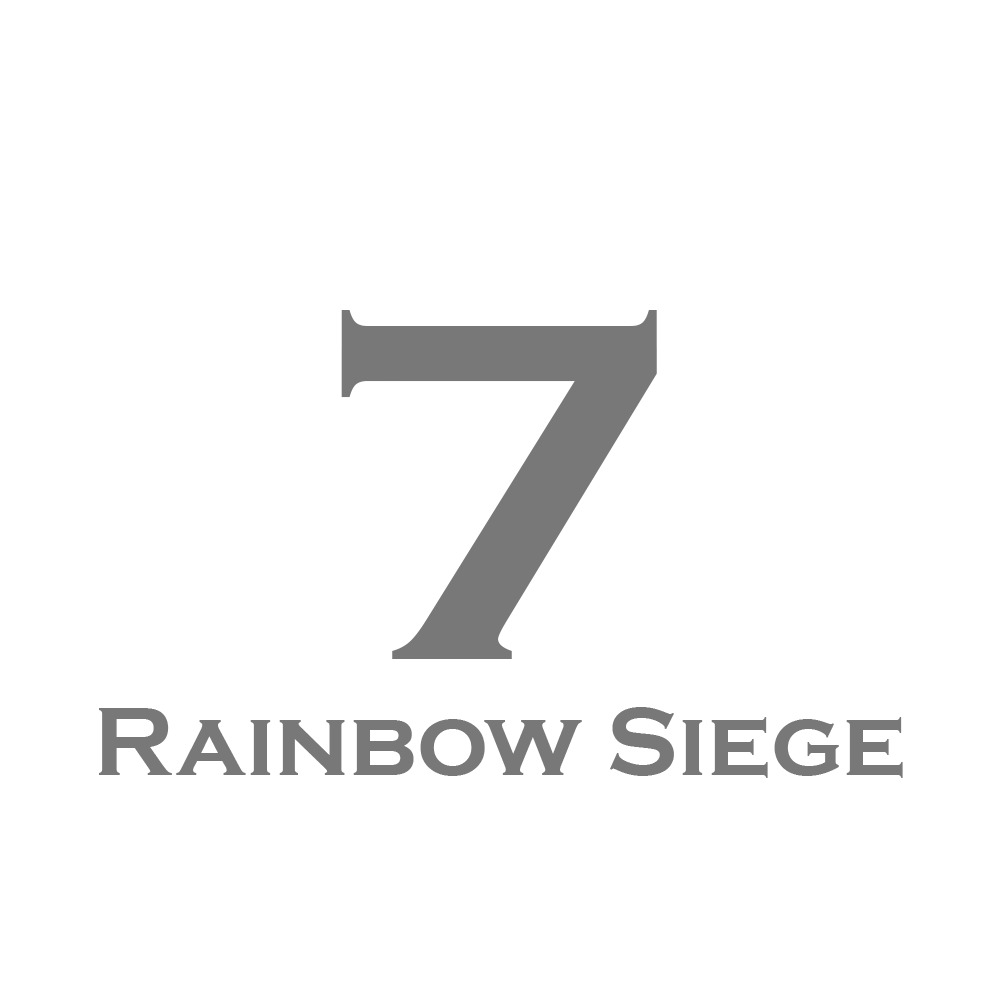
<style>
.page{position:relative;width:1000px;height:1000px;background:#ffffff}
.page>*{position:absolute;margin:0}
.t1{font:500px "CopperplateGothic-Bold";color:#787878}
.t2{font:100px "CopperplateGothic-Bold";color:#787878}
</style>
<div class="page">
<p class="t1" style="left:341px;top:310px;width:316px;height:349px">7</p>
<p class="t2" style="left:99px;top:707px;width:804px;height:71px">Rainbow Siege</p>
</div>
